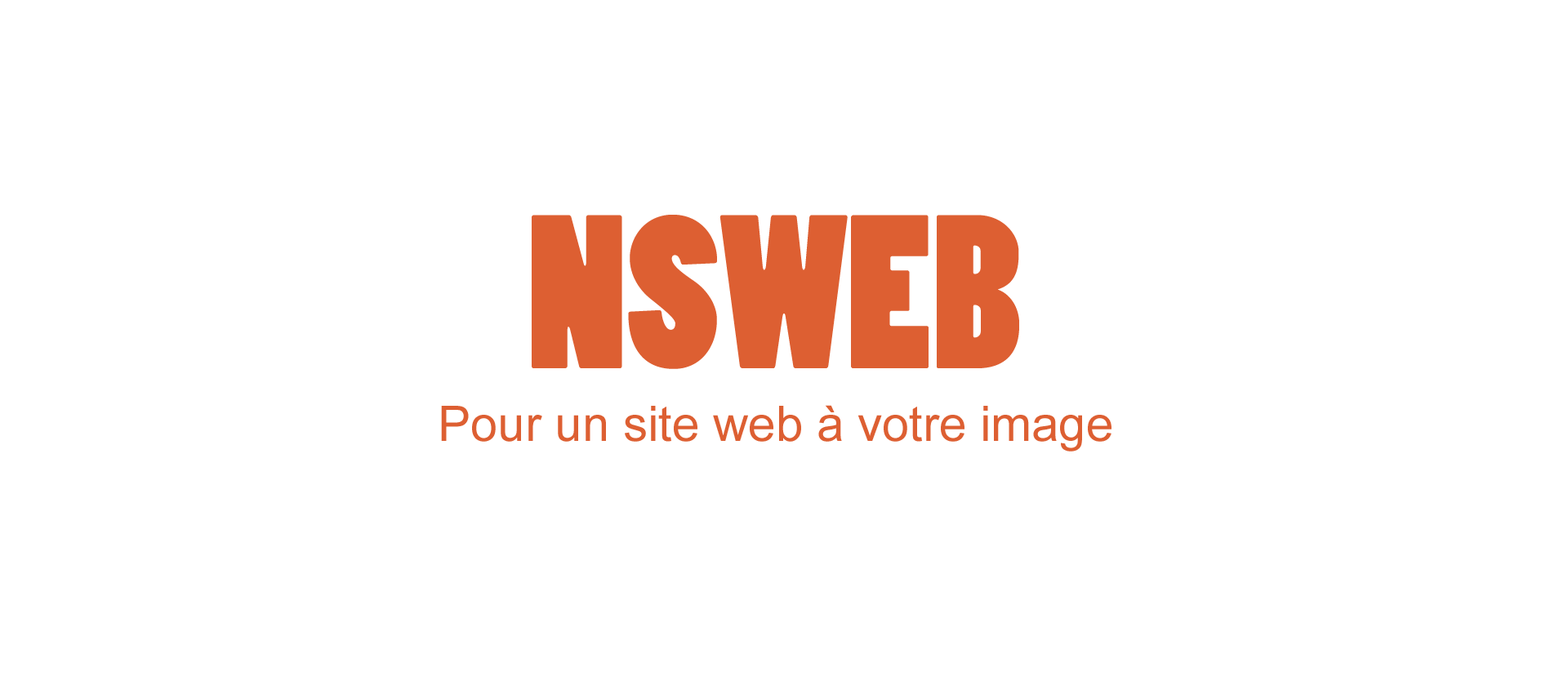
<style>
.page{position:relative;width:1568px;height:694px;background:#ffffff}
.page>*{position:absolute;margin:0}
.t1{font:204.2px "PoplarStd";color:#dd5f32}
.t2{font:49px "ArialMT";color:#dd5f32}
</style>
<div class="page">
<p class="t1" style="left:532px;top:215px;width:487px;height:154px">NSWEB</p>
<p class="t2" style="left:441px;top:405px;width:670px;height:47px">Pour un site web à votre image</p>
</div>
